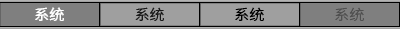
<style>
.page{position:relative;width:400px;height:29px;background:#7f7f7f}
.page>*{position:absolute;margin:0}
.t1{font:15px "SourceHanSansSC-Normal";color:#ffffff}
.t2{font:15px "SourceHanSansSC-Normal";color:#191919}
.t3{font:15px "SourceHanSansSC-Normal";color:#000000}
.t4{font:15px "SourceHanSansSC-Normal";color:#505050}
</style>
<div class="page">
<p class="t1" style="left:35px;top:7px;width:29px;height:14px">系统</p>
<p class="t2" style="left:135px;top:7px;width:29px;height:14px">系统</p>
<p class="t3" style="left:235px;top:7px;width:29px;height:14px">系统</p>
<p class="t4" style="left:335px;top:7px;width:29px;height:14px">系统</p>
</div>
